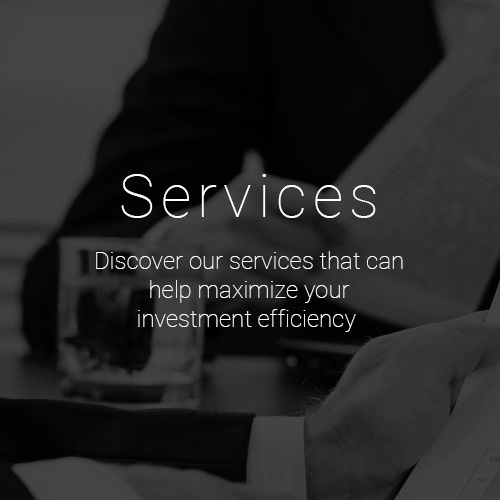
<style>
.page{position:relative;width:500px;height:500px}
.page>*{position:absolute;margin:0}
.t1{font:60px "Roboto-Thin";letter-spacing:0.1em;color:#ffffff}
.t2{font:24px "Roboto-Thin";color:#ffffff}
</style>
<div class="page">
<p class="t1" style="left:121px;top:174px;width:255px;height:44px">Services</p>
<p class="t2" style="left:96px;top:251px;width:307px;height:81px;text-align:center">Discover our services that can<br>help maximize your<br>investment efficiency</p>
</div>
